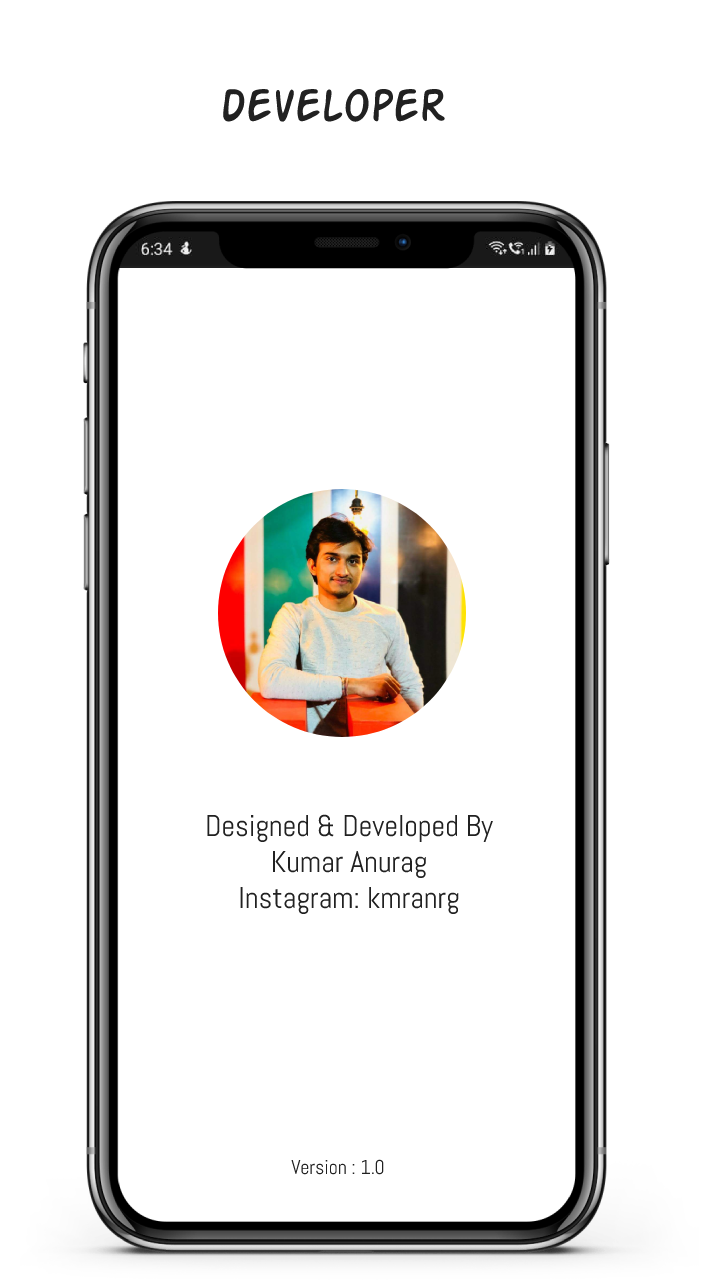
<style>
.page{position:relative;width:720px;height:1280px;background:#ffffff}
.page>*{position:absolute;margin:0}
.t1{font:50px "ActionMan";color:#212121}
.t2{font:30px "Abel-Regular";color:#212121}
.t3{font:20px "Abel-Regular";color:#212121}
</style>
<div class="page">
<p class="t1" style="left:223px;top:88px;width:222px;height:34px">developer</p>
<p class="t2" style="left:207px;top:814px;width:286px;height:101px;text-align:center">Designed &amp; Developed By<br>Kumar Anurag<br>Instagram: kmranrg</p>
<p class="t3" style="left:291px;top:1159px;width:93px;height:16px">Version : 1.0</p>
</div>
